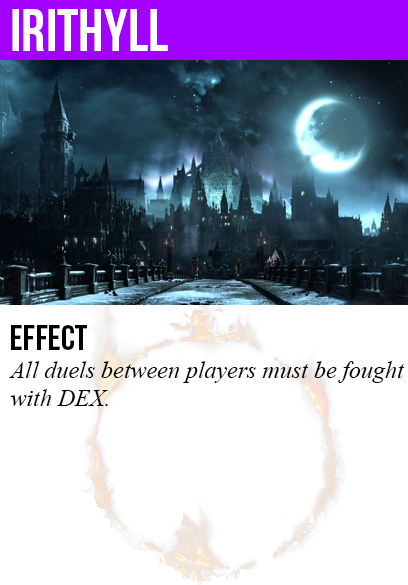
<style>
.page{position:relative;width:408px;height:585px;background:#ffffff}
.page>*{position:absolute;margin:0}
.t1{font:60px "BebasNeue";color:#ffffff}
.t2{font:36px "BebasNeue";color:#000000}
.t3{font:24px "TimesNewRomanPS-ItalicMT";color:#000000}
</style>
<div class="page">
<p class="t1" style="left:12px;top:9px;width:156px;height:42px">irithyll</p>
<p class="t2" style="left:11px;top:325px;width:76px;height:25px">Effect</p>
<p class="t3" style="left:9px;top:361px;width:395px;height:45px">All duels between players must be fought<br>with DEX.</p>
</div>
